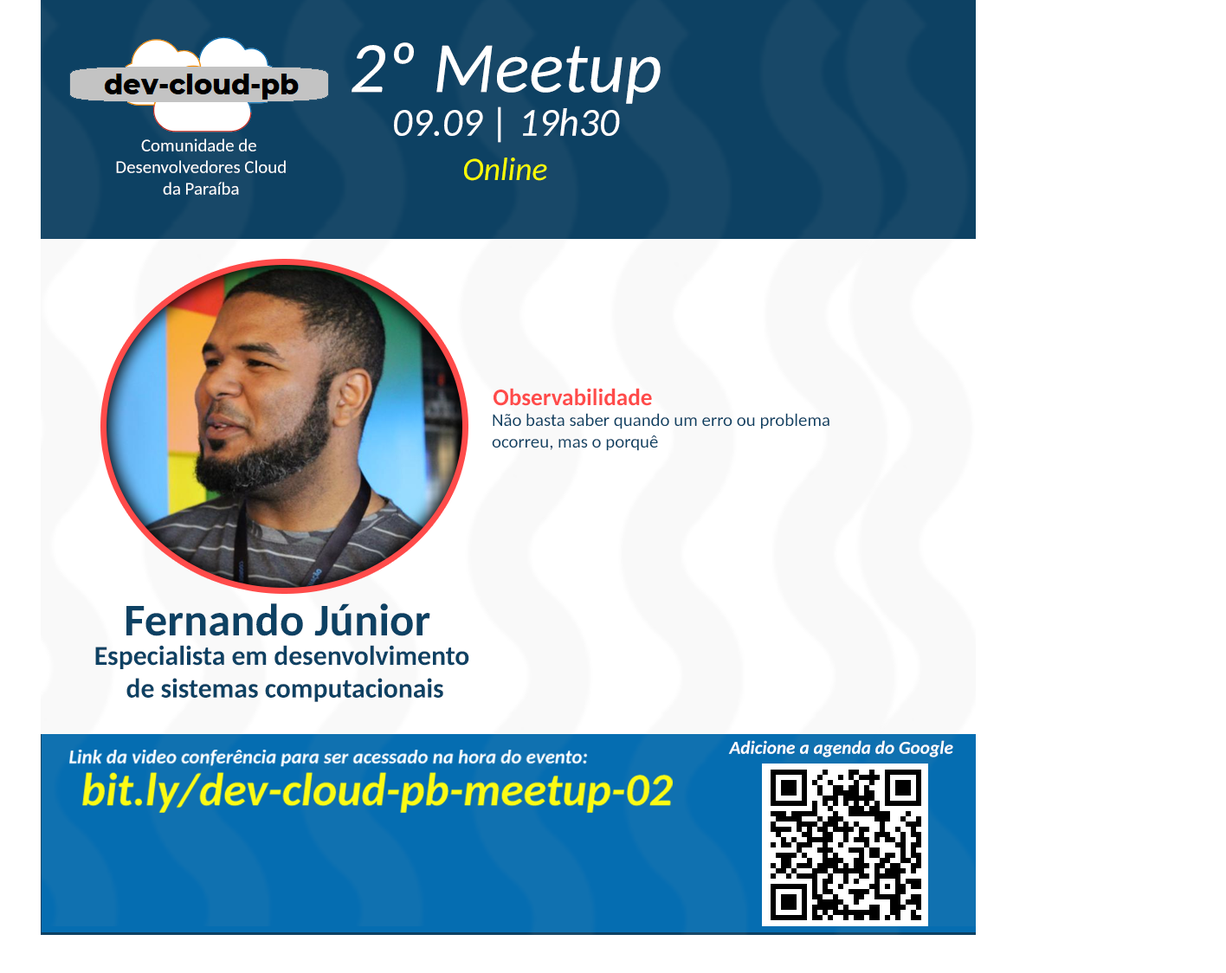
<style>
.page{position:relative;width:1226px;height:973px;background:#ffffff}
.page>*{position:absolute;margin:0}
.t1{font:72.3px "Carlito-Italic";color:#ffffff}
.t2{font:39.6px "Carlito-Italic";color:#ffffff}
.t3{font:18px "Carlito";color:#ffffff}
.t4{font:32.4px "Carlito-Italic";color:#f8fb00}
.t5{font:23.5px "Carlito-Bold";color:#ff4b4a}
.t6{font:18px "Carlito";color:#0d4163}
.t7{font:45.5px "Carlito-Bold";color:#0d4163}
.t8{font:27.3px "Carlito-Bold";color:#0d4163}
.t9{font:18.4px "Carlito-BoldItalic";color:#ffffff}
</style>
<div class="page">
<p class="t1" style="left:351px;top:42px;width:309px;height:62px">2º Meetup</p>
<p class="t2" style="left:394px;top:106px;width:226px;height:37px">09.09 | 19h30</p>
<p class="t3" style="left:116px;top:138px;width:170px;height:57px;text-align:center">Comunidade de <br>Desenvolvedores Cloud<br>da Paraíba</p>
<p class="t4" style="left:464px;top:158px;width:83px;height:23px">Online</p>
<p class="t5" style="left:493px;top:388px;width:159px;height:18px">Observabilidade</p>
<p class="t6" style="left:492px;top:413px;width:337px;height:38px">Não basta saber quando um erro ou problema <br>ocorreu, mas o porquê</p>
<p class="t7" style="left:126px;top:603px;width:304px;height:33px">Fernando Júnior</p>
<p class="t8" style="left:95px;top:645px;width:374px;height:57px;text-align:center">Especialista em desenvolvimento<br> de sistemas computacionais</p>
<p class="t9" style="left:728px;top:740px;width:225px;height:17px">Adicione a agenda do Google</p>
</div>
